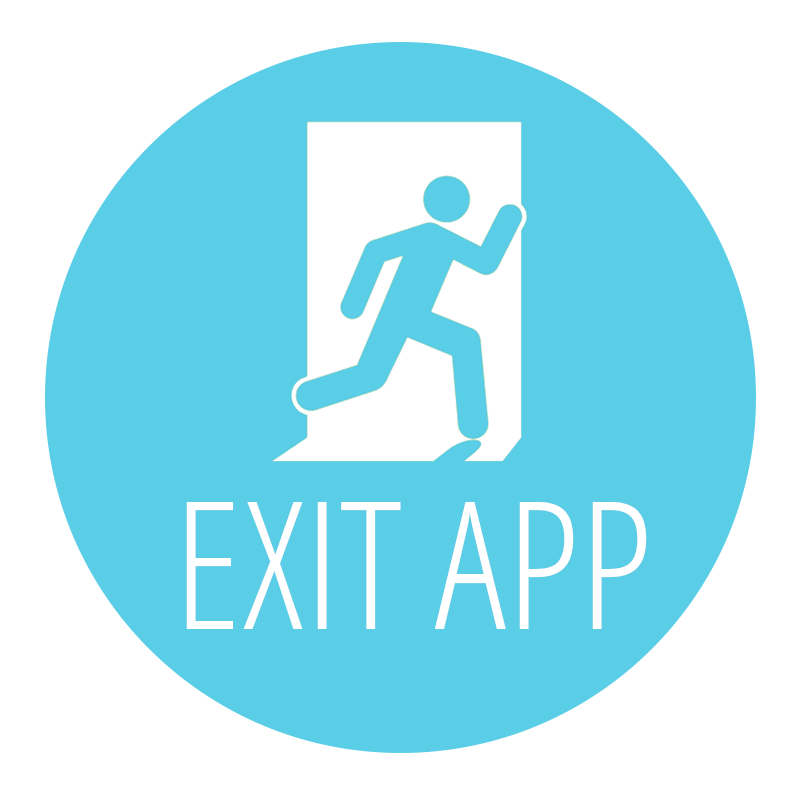
<style>
.page{position:relative;width:800px;height:800px;background:#59cee6}
.page>*{position:absolute;margin:0}
.t1{font:178px "OpenSans-CondensedLight";color:#ffffff}
</style>
<div class="page">
<p class="t1" style="left:186px;top:502px;width:461px;height:127px">EXIT APP</p>
</div>
